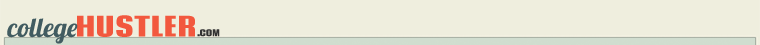
<style>
.page{position:relative;width:760px;height:45px;background:#efeede}
.page>*{position:absolute;margin:0}
.t1{font:26.6px "Coda-Heavy";letter-spacing:-0.075em;color:#f2583e}
.t2{font:26.6px "Lobster";color:#425c61}
.t3{font:8.9px "Coda-Heavy";letter-spacing:-0.075em;color:#333333}
</style>
<div class="page">
<p class="t1" style="left:77px;top:15px;width:118px;height:22px">HUSTLER</p>
<p class="t2" style="left:7px;top:18px;width:71px;height:26px">college</p>
<p class="t3" style="left:197px;top:29px;width:23px;height:8px">.COM</p>
</div>
